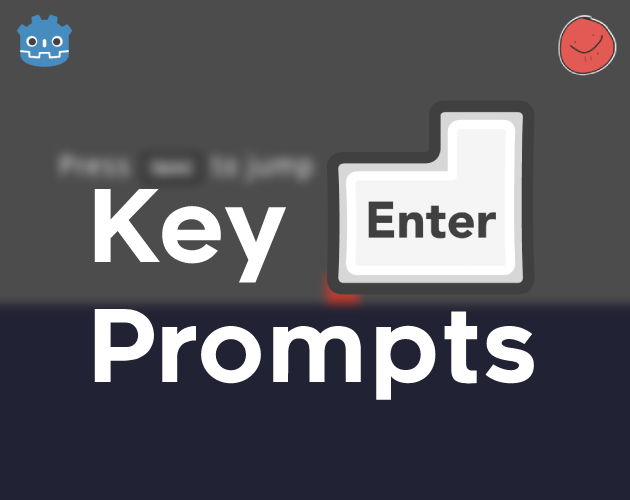
<style>
.page{position:relative;width:630px;height:500px;background:#4c4c4c}
.page>*{position:absolute;margin:0}
.t1{font:100px "Renogare-Regular";color:#ffffff}
</style>
<div class="page">
<p class="t1" style="left:94px;top:188px;width:440px;height:212px">Key<br>Prompts</p>
</div>
